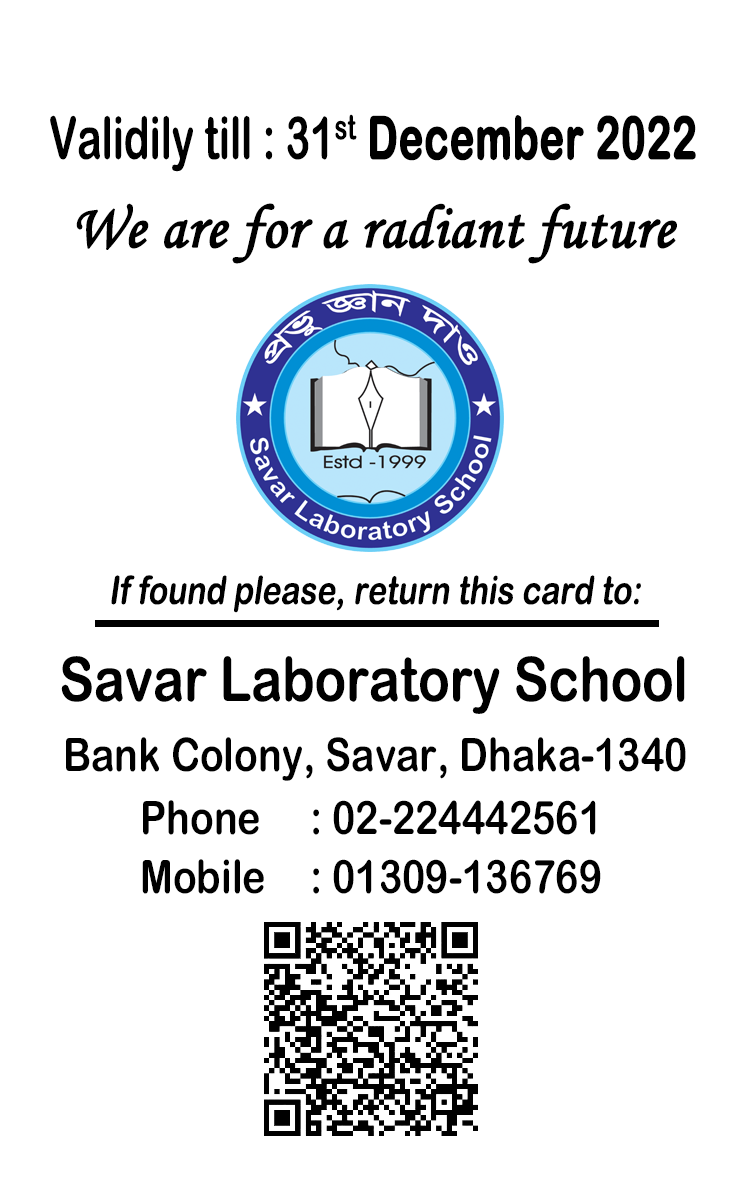
<style>
.page{position:relative;width:746px;height:1180px;background:#ffffff}
.page>*{position:absolute;margin:0}
.t1{font:58.8px "ArialRoundedMTBold";color:#000000;scale:0.7 1}
.t2{font:58.8px "ArialRoundedMTBold";color:#000000;font-weight:bold;scale:0.7 1}
.t3{font:44.2px "MonotypeCorsiva";color:#000000;font-weight:bold;scale:0.95 1}
.t4{font:39.2px "ArialRoundedMTBold";color:#000000;font-style:italic;scale:0.81 1}
.t5{font:61.3px "ArialRoundedMTBold";color:#000000;scale:0.85 1}
.t6{font:46.3px "ArialRoundedMTBold";color:#000000;scale:0.85 1}
</style>
<div class="page">
<p class="t1" style="left:50px;top:114px;width:646px;height:58px">Validily till : 31st<span class="t2"> December 2022</span></p>
<p class="t3" style="left:76px;top:203px;width:601px;height:61px">We are for a radiant future</p>
<p class="t4" style="left:111px;top:575px;width:530px;height:38px">If found please, return this card to:</p>
<p class="t5" style="left:61px;top:656px;width:624px;height:58px">Savar Laboratory School</p>
<p class="t6" style="left:66px;top:737px;width:620px;height:44px">Bank Colony, Savar, Dhaka-1340</p>
<p class="t6" style="left:143px;top:800px;width:453px;height:35px">Phone : 02-224442561</p>
<p class="t6" style="left:142px;top:859px;width:459px;height:35px">Mobile : 01309-136769</p>
</div>
